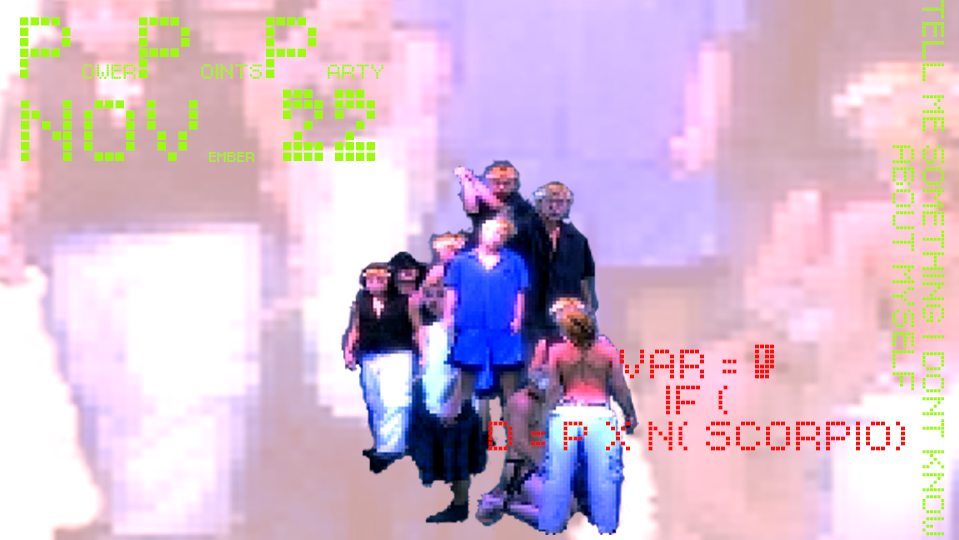
<style>
.page{position:relative;width:959px;height:540px}
.page>*{position:absolute;margin:0}
.t1{font:22.2px "TamaConnectType";color:#9efa0d}
.t2{font:14.6px "TamaConnectType";color:#9efa0d}
.t3{font:62.9px "TamaConnectType";color:#9efa0d}
.t4{font:10px "TamaConnectType";color:#9efa0d}
.t5{font:30px "TamaConnectType";color:#fa0d0d}
</style>
<div class="page">
<p class="t1" style="left:922px;top:0px;width:23px;height:536px;rotate:90deg">Tell Me SOMething I dont kNow</p>
<p class="t2" style="left:20px;top:17px;width:364px;height:62px"><span class="t3">P</span>ower<span class="t3">P</span>oints<span class="t3">P</span>arty</p>
<p class="t4" style="left:21px;top:89px;width:354px;height:73px"><span class="t3">NoV</span>ember<span class="t3"> 22</span></p>
<p class="t1" style="left:892px;top:145px;width:23px;height:246px;rotate:90deg">About myself</p>
<p class="t5" style="left:488px;top:344px;width:417px;height:107px;text-align:center">VAr = 0<br>if (<br>d = p x N( Scorpio)</p>
</div>
